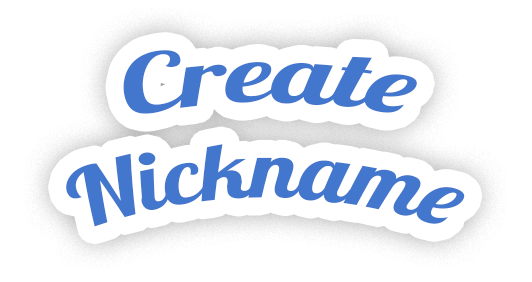
<style>
.page{position:relative;width:532px;height:282px;background:#ffffff}
.page>*{position:absolute;margin:0}
.t1{font:75px "Lobster1.4";color:#4377cd}
</style>
<div class="page">
<p class="t1" style="left:66px;top:50px;width:399px;height:177px;text-align:center">Create Nickname</p>
</div>
